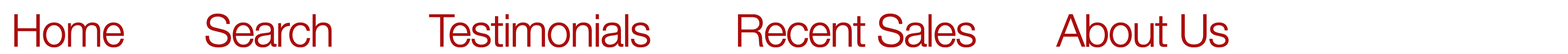
<style>
.page{position:relative;width:1568px;height:54px;background:#ffffff}
.page>*{position:absolute;margin:0}
.t1{font:44.7px "HelveticaNeue-Light";letter-spacing:-0.05em;color:#ab0d0d;font-weight:bold}
</style>
<div class="page">
<p class="t1" style="left:14px;top:13px;width:1215px;height:34px">Home      Search      Testimonials      Recent Sales      About Us</p>
</div>
